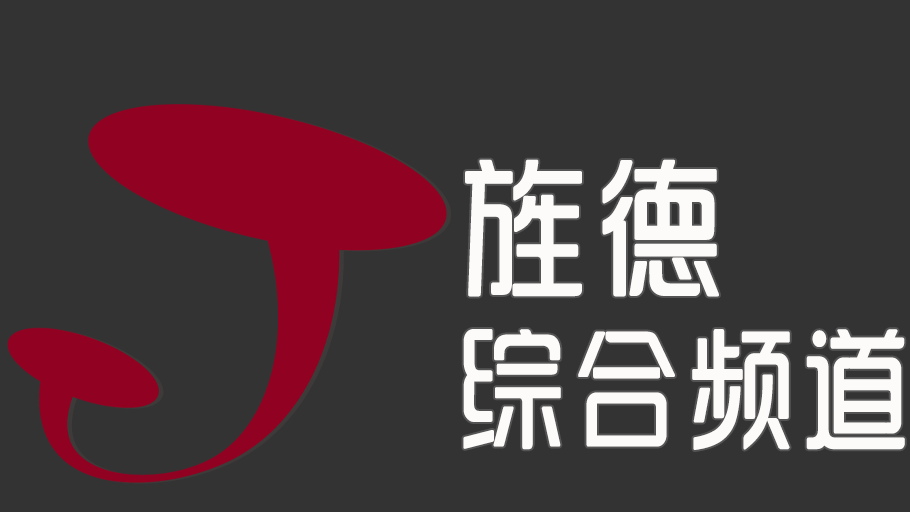
<style>
.page{position:relative;width:910px;height:512px;background:#333333}
.page>*{position:absolute;margin:0}
.t1{font:132px/170px "SJyunlvyuan";letter-spacing:0.02em;color:#fcfbf9;scale:0.85 1}
.t2{font:150px/170px "SJyunlvyuan";letter-spacing:0.02em;color:#fcfbf9;scale:0.9 1}
</style>
<div class="page">
<p class="t1" style="left:463px;top:159px;width:442px;height:291px"><span class="t2">旌德<br></span>综合频道</p>
</div>
